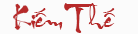
<style>
.page{position:relative;width:138px;height:34px;background:#fbfbfb}
.page>*{position:absolute;margin:0}
.t1{font:23px "VNI-HLThuphap";color:#b62929}
</style>
<div class="page">
<p class="t1" style="left:13px;top:3px;width:102px;height:30px">Kieám Theá</p>
</div>
